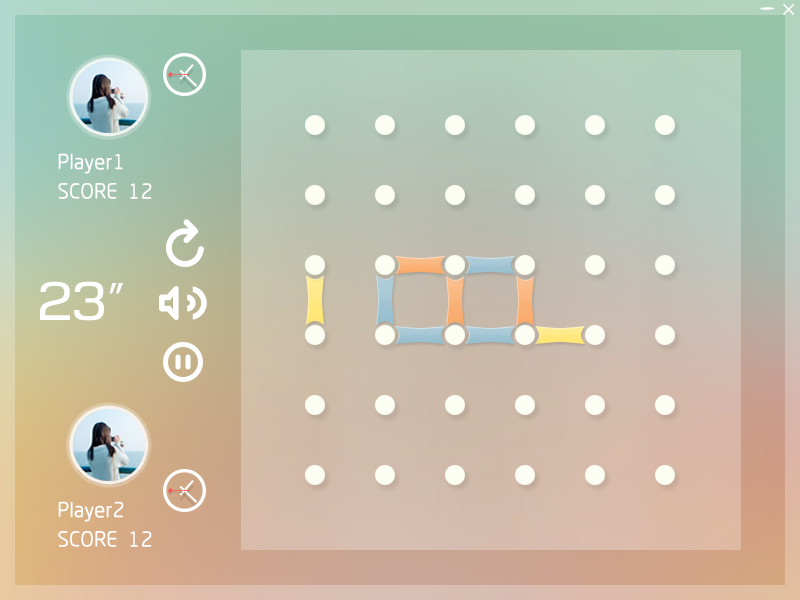
<style>
.page{position:relative;width:800px;height:600px}
.page>*{position:absolute;margin:0}
.t1{font:22px "MFYueYuan_Noncommercial-Regular";letter-spacing:-0.02em;color:#ffffff}
.t2{font:52px "Moire";letter-spacing:-0.02em;color:#ffffff}
.t3{font:46px "AdobeHeitiStd-Regular";letter-spacing:-0.02em;color:#ffffff}
</style>
<div class="page">
<p class="t1" style="left:58px;top:153px;width:65px;height:21px">Player1</p>
<p class="t1" style="left:58px;top:183px;width:59px;height:16px">SCORE</p>
<p class="t1" style="left:130px;top:183px;width:22px;height:16px">12</p>
<p class="t2" style="left:40px;top:281px;width:83px;height:40px">23<span class="t3">″</span></p>
<p class="t1" style="left:58px;top:501px;width:66px;height:21px">Player2</p>
<p class="t1" style="left:58px;top:531px;width:59px;height:16px">SCORE</p>
<p class="t1" style="left:130px;top:531px;width:22px;height:16px">12</p>
</div>
